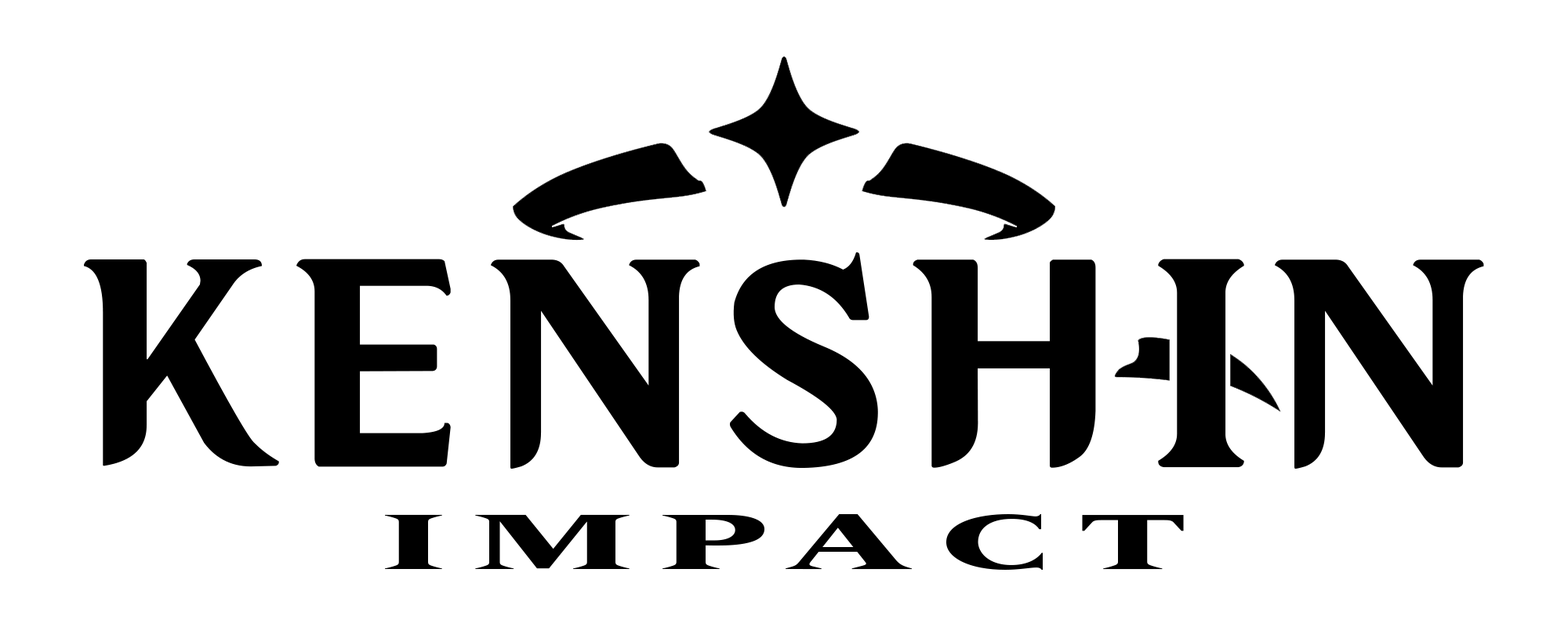
<style>
.page{position:relative;width:1568px;height:627px;background:#ffffff}
.page>*{position:absolute;margin:0}
.t1{font:261.3px "HYWenHei-HEW";letter-spacing:0.05em;color:#000000}
.t2{font:76.2px "VersaillesLTStd-Black";letter-spacing:0.2em;color:#000000;scale:1.86 1}
</style>
<div class="page">
<p class="t1" style="left:84px;top:252px;width:1400px;height:217px">KENSHIN</p>
<p class="t2" style="left:385px;top:514px;width:799px;height:56px">IMPACT</p>
</div>
